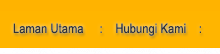
<style>
.page{position:relative;width:220px;height:54px;background:#ffb500}
.page>*{position:absolute;margin:0}
.t1{font:13px "ArialMT";letter-spacing:0.01em;color:#333333;scale:0.85 1}
</style>
<div class="page">
<p class="t1" style="left:13px;top:23px;width:188px;height:13px">Laman Utama     :    Hubungi Kami    :</p>
</div>
